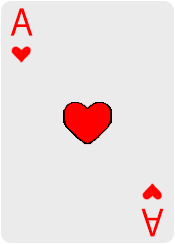
<style>
.page{position:relative;width:175px;height:244px;background:#ebebeb}
.page>*{position:absolute;margin:0}
.t1{font:36px "KozGoPr6N-Regular";color:#ff0000}
</style>
<div class="page">
<p class="t1" style="left:10px;top:8px;width:23px;height:28px">A</p>
<p class="t1" style="left:141px;top:208px;width:23px;height:29px;rotate:-180deg">A</p>
</div>
